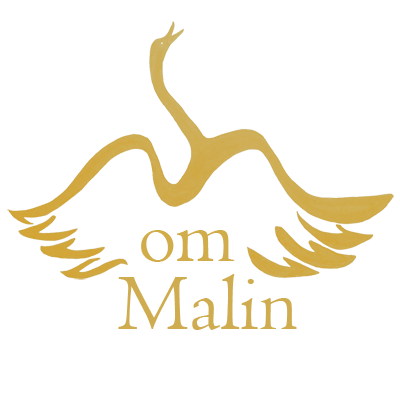
<style>
.page{position:relative;width:400px;height:397px;background:#ffffff}
.page>*{position:absolute;margin:0}
.t1{font:82px "Centaur";color:#d1ac4b}
.t2{font:82px "Centaur";color:#d0ac51}
</style>
<div class="page">
<p class="t1" style="left:141px;top:230px;width:94px;height:32px">om</p>
<p class="t2" style="left:118px;top:274px;width:179px;height:56px">Malin</p>
</div>
